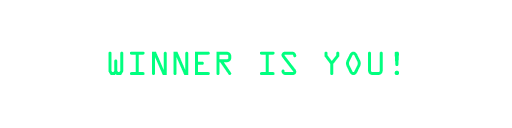
<style>
.page{position:relative;width:512px;height:128px;background:#ffffff}
.page>*{position:absolute;margin:0}
.t1{font:30px "OCRAStd";color:#01ff7f}
</style>
<div class="page">
<p class="t1" style="left:108px;top:51px;width:291px;height:24px">WINNER IS YOU!</p>
</div>
